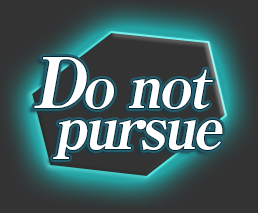
<style>
.page{position:relative;width:258px;height:213px;background:#333333}
.page>*{position:absolute;margin:0}
.t1{font:60px/50px "RyuminPro-ExBold";letter-spacing:-0.06em;color:#ffffff;font-style:italic}
.t2{font:70px/50px "RyuminPro-ExBold";letter-spacing:-0.06em;color:#ffffff;font-style:italic}
</style>
<div class="page">
<p class="t1" style="left:34px;top:57px;width:189px;height:102px;text-align:center"><span class="t2">D</span>o not<br>  pursue</p>
</div>
